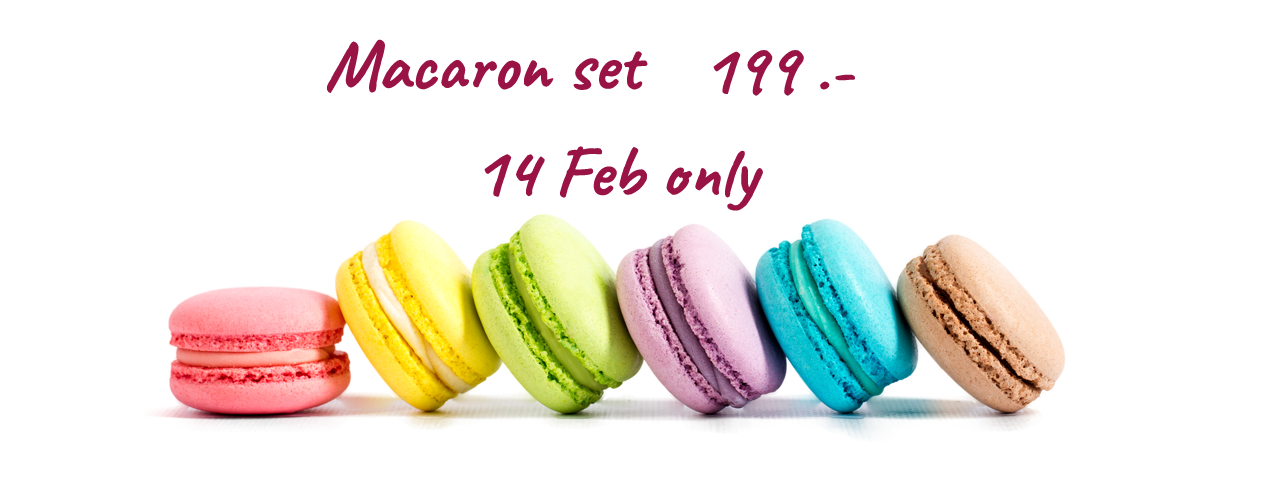
<style>
.page{position:relative;width:1280px;height:500px;background:#ffffff}
.page>*{position:absolute;margin:0}
.t1{font:72px "CaveatRoman-Bold";color:#991345}
</style>
<div class="page">
<p class="t1" style="left:326px;top:39px;width:322px;height:54px">Macaron set</p>
<p class="t1" style="left:713px;top:50px;width:142px;height:46px">199 .-</p>
<p class="t1" style="left:484px;top:146px;width:279px;height:65px">14 Feb only</p>
</div>
